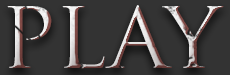
<style>
.page{position:relative;width:230px;height:75px;background:#333333}
.page>*{position:absolute;margin:0}
.t1{font:96.6px "TrajanPro-Regular"}
</style>
<div class="page">
<p class="t1" style="left:7px;top:5px;width:217px;height:64px">play</p>
</div>
